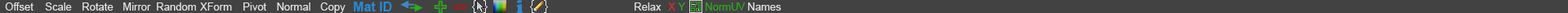
<style>
.page{position:relative;width:1568px;height:13px;background:#424242}
.page>*{position:absolute;margin:0}
.t1{font:10.6px "ArialMT";color:#e5e5e5}
.t2{font:13.1px "Arial-BoldMT";color:#2988d2}
.t3{font:18px "CooperBlackStd";color:#3284c7}
.t4{font:10.6px "ArialMT";color:#da2e2d}
.t5{font:10.6px "ArialMT";color:#2fa622}
</style>
<div class="page">
<p class="t1" style="left:5px;top:2px;width:28px;height:9px">Offset</p>
<p class="t1" style="left:45px;top:2px;width:27px;height:9px">Scale</p>
<p class="t1" style="left:82px;top:2px;width:32px;height:9px">Rotate</p>
<p class="t1" style="left:123px;top:2px;width:28px;height:9px">Mirror</p>
<p class="t1" style="left:157px;top:2px;width:39px;height:9px">Random</p>
<p class="t1" style="left:200px;top:2px;width:32px;height:9px">XForm</p>
<p class="t1" style="left:243px;top:2px;width:24px;height:9px">Pivot</p>
<p class="t1" style="left:277px;top:2px;width:33px;height:9px">Normal</p>
<p class="t1" style="left:320px;top:2px;width:25px;height:11px">Copy</p>
<p class="t2" style="left:354px;top:2px;width:38px;height:9px">Mat ID</p>
<p class="t3" style="left:516px;top:0px;width:7px;height:13px">i</p>
<p class="t1" style="left:635px;top:2px;width:27px;height:9px">Relax</p>
<p class="t4" style="left:668px;top:2px;width:17px;height:9px">X <span class="t5">Y</span></p>
<p class="t1" style="left:748px;top:2px;width:34px;height:9px">Names</p>
</div>
